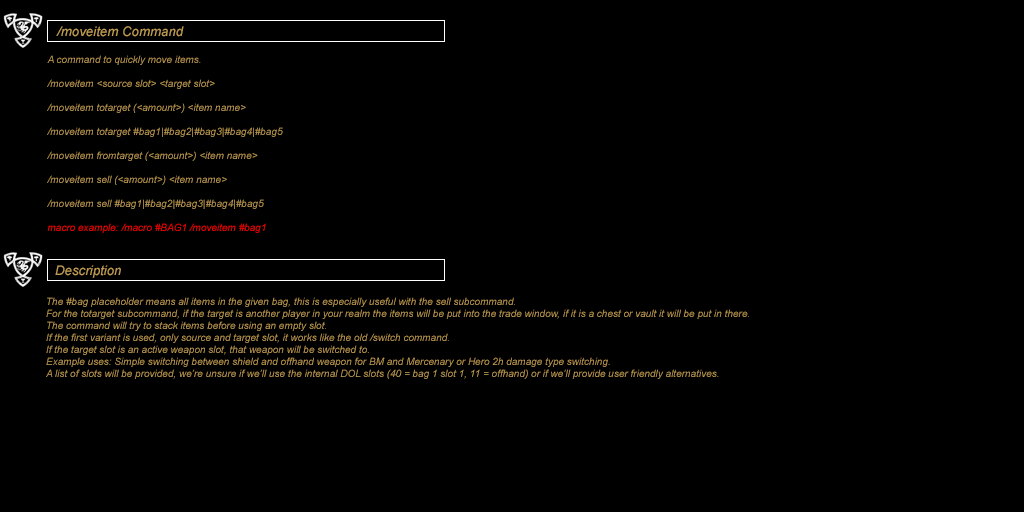
<style>
.page{position:relative;width:1024px;height:512px;background:#000000}
.page>*{position:absolute;margin:0}
.t1{font:13.3px "Arial-ItalicMT";color:#be9b53}
.t2{font:10px "Arial-ItalicMT";color:#be9b53}
.t3{font:10px "Arial-ItalicMT";color:#ff0000}
</style>
<div class="page">
<p class="t1" style="left:56px;top:26px;width:128px;height:11px">/moveitem Command</p>
<p class="t2" style="left:47px;top:55px;width:236px;height:178px">A command to quickly move items.<br><br>/moveitem &lt;source slot&gt; &lt;target slot&gt;<br><br>/moveitem totarget (&lt;amount&gt;) &lt;item name&gt;<br><br>/moveitem totarget #bag1|#bag2|#bag3|#bag4|#bag5<br><br>/moveitem fromtarget (&lt;amount&gt;) &lt;item name&gt;<br><br>/moveitem sell (&lt;amount&gt;) &lt;item name&gt;<br><br>/moveitem sell #bag1|#bag2|#bag3|#bag4|#bag5<br><br><span class="t3">macro example: /macro #BAG1 /moveitem #bag1</span></p>
<p class="t1" style="left:55px;top:265px;width:66px;height:13px">Description</p>
<p class="t2" style="left:46px;top:297px;width:703px;height:82px">The #bag placeholder means all items in the given bag, this is especially useful with the sell subcommand. <br>For the totarget subcommand, if the target is another player in your realm the items will be put into the trade window, if it is a chest or vault it will be put in there. <br>The command will try to stack items before using an empty slot.<br>If the first variant is used, only source and target slot, it works like the old /switch command. <br>If the target slot is an active weapon slot, that weapon will be switched to. <br>Example uses: Simple switching between shield and offhand weapon for BM and Mercenary or Hero 2h damage type switching. <br>A list of slots will be provided, we’re unsure if we’ll use the internal DOL slots (40 = bag 1 slot 1, 11 = offhand) or if we’ll provide user friendly alternatives.</p>
</div>
